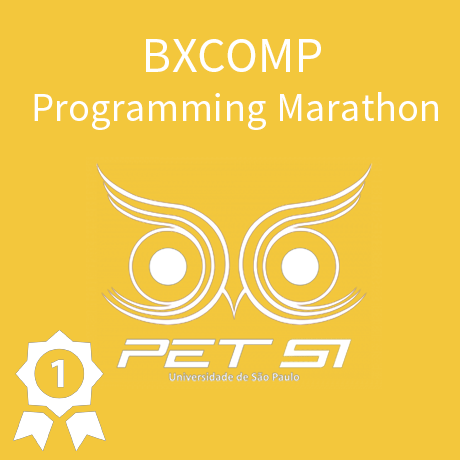
<style>
.page{position:relative;width:460px;height:460px;background:#f3c73c}
.page>*{position:absolute;margin:0}
.t1{font:50px "SourceSansPro-Regular";letter-spacing:0.015em;color:#ffffff}
.t2{font:40px "SourceSansPro-Regular";letter-spacing:0.015em;color:#ffffff}
</style>
<div class="page">
<p class="t1" style="left:146px;top:39px;width:175px;height:33px">BXCOMP</p>
<p class="t2" style="left:34px;top:92px;width:404px;height:38px">Programming Marathon</p>
</div>
